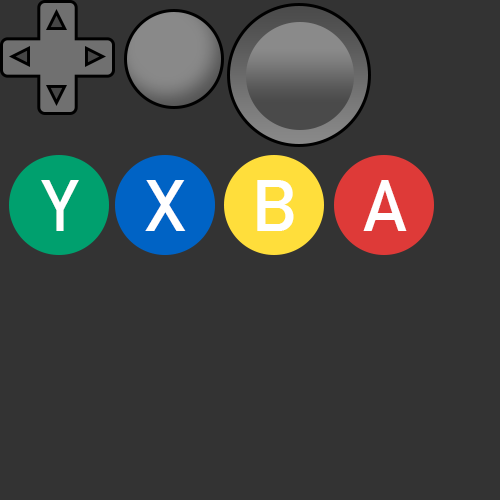
<style>
.page{position:relative;width:500px;height:500px;background:#333333}
.page>*{position:absolute;margin:0}
.t1{font:72px "DINAlternate-Bold";color:#ffffff}
</style>
<div class="page">
<p class="t1" style="left:41px;top:180px;width:38px;height:51px">Y</p>
<p class="t1" style="left:145px;top:180px;width:41px;height:51px">X</p>
<p class="t1" style="left:257px;top:180px;width:37px;height:51px">B</p>
<p class="t1" style="left:363px;top:180px;width:44px;height:51px">A</p>
</div>
